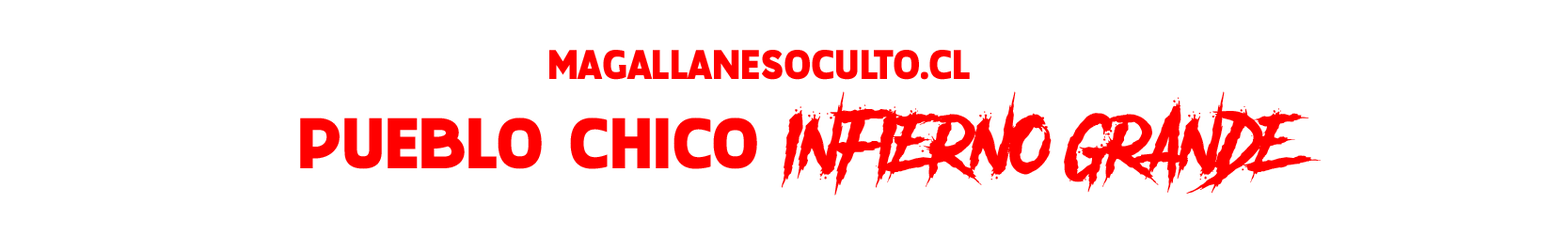
<style>
.page{position:relative;width:1568px;height:235px;background:#ffffff}
.page>*{position:absolute;margin:0}
.t1{font:40.5px "TravelGrowthSansDEMO-Regular";color:#ff0000;text-transform:uppercase}
.t2{font:70.5px "AnotherDangerDemo";color:#ff0000;text-transform:uppercase}
.t3{font:70.5px "BebasNeue-Regular";color:#ff0000;text-transform:uppercase}
.t4{font:70.5px "TravelGrowthSansDEMO-Regular";color:#ff0000;text-transform:uppercase}
</style>
<div class="page">
<p class="t1" style="left:549px;top:50px;width:421px;height:30px">MAGALLANESOCULTO.CL</p>
<p class="t2" style="left:782px;top:91px;width:540px;height:105px"><span class="t3">  </span>INFIERNO GRANDE</p>
<p class="t4" style="left:300px;top:118px;width:457px;height:51px">PUEBLO CHICO</p>
</div>
